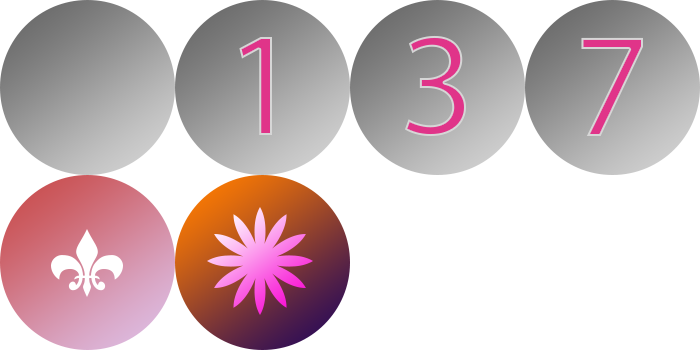
<style>
.page{position:relative;width:700px;height:350px;background:#ffffff}
.page>*{position:absolute;margin:0}
.t1{font:150px "MyriadPro-Regular";color:#e03489}
</style>
<div class="page">
<p class="t1" style="left:239px;top:37px;width:33px;height:98px">1</p>
<p class="t1" style="left:405px;top:35px;width:61px;height:102px">3</p>
<p class="t1" style="left:581px;top:37px;width:62px;height:99px">7</p>
</div>
